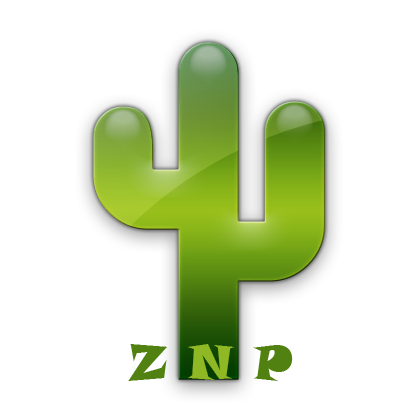
<style>
.page{position:relative;width:420px;height:420px;background:#ffffff}
.page>*{position:absolute;margin:0}
.t1{font:48px "SnapITC-Regular";color:#518110}
.t2{font:48px "SnapITC-Regular";color:#8fb924}
</style>
<div class="page">
<p class="t1" style="left:128px;top:344px;width:165px;height:37px">Z<span class="t2"> N </span>P</p>
</div>
